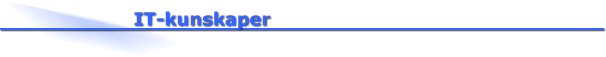
<style>
.page{position:relative;width:606px;height:57px;background:#ffffff}
.page>*{position:absolute;margin:0}
.t1{font:18px "Verdana-Bold";color:#3366ff}
</style>
<div class="page">
<p class="t1" style="left:134px;top:11px;width:136px;height:18px">IT-kunskaper</p>
</div>
